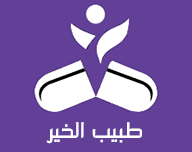
<style>
.page{position:relative;width:192px;height:152px;background:#624097}
.page>*{position:absolute;margin:0}
.t1{font:25.9px "PooladLight";color:#ffffff}
</style>
<div class="page">
<p class="t1" style="left:46px;top:122px;width:96px;height:22px">طبيب الخير</p>
</div>
